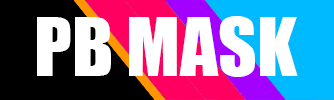
<style>
.page{position:relative;width:334px;height:100px;background:#ffffff}
.page>*{position:absolute;margin:0}
.t1{font:75px "Impact";color:#ffffff}
</style>
<div class="page">
<p class="t1" style="left:37px;top:16px;width:261px;height:61px">PB MASK</p>
</div>
